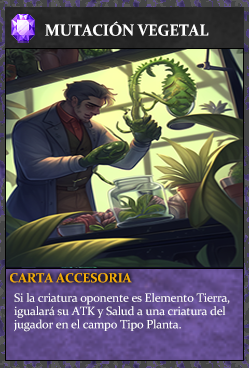
<style>
.page{position:relative;width:249px;height:368px}
.page>*{position:absolute;margin:0}
.t1{font:16px "Constantia-Bold";letter-spacing:-0.02em;color:#ffffff}
.t2{font:13.3px "Constantia-Bold";letter-spacing:-0.02em;color:#f2ac05}
.t3{font:12px/13.3px "Constantia";letter-spacing:-0.02em;color:#ffffff}
</style>
<div class="page">
<p class="t1" style="left:45px;top:21px;width:164px;height:15px">MUTACIÓN VEGETAL</p>
<p class="t2" style="left:10px;top:273px;width:122px;height:10px">CARTA ACCESORIA</p>
<p class="t3" style="left:14px;top:293px;width:216px;height:39px">Si la criatura oponente es Elemento Tierra,<br>igualará su ATK y Salud a una criatura del<br>jugador en el campo Tipo Planta.</p>
</div>
